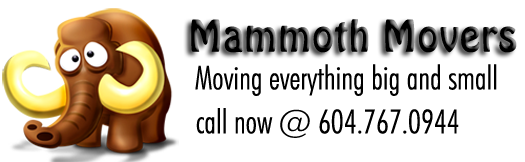
<style>
.page{position:relative;width:525px;height:162px;background:#ffffff}
.page>*{position:absolute;margin:0}
.t1{font:42.1px "HoboBT-Regular"}
.t2{font:33.1px "FuturaBT-LightCondensed";color:#000000}
</style>
<div class="page">
<p class="t1" style="left:191px;top:19px;width:326px;height:34px">Mammoth Movers</p>
<p class="t2" style="left:195px;top:64px;width:302px;height:32px">Moving everything big and small</p>
<p class="t2" style="left:196px;top:108px;width:263px;height:30px">call now @ 604.767.0944</p>
</div>
